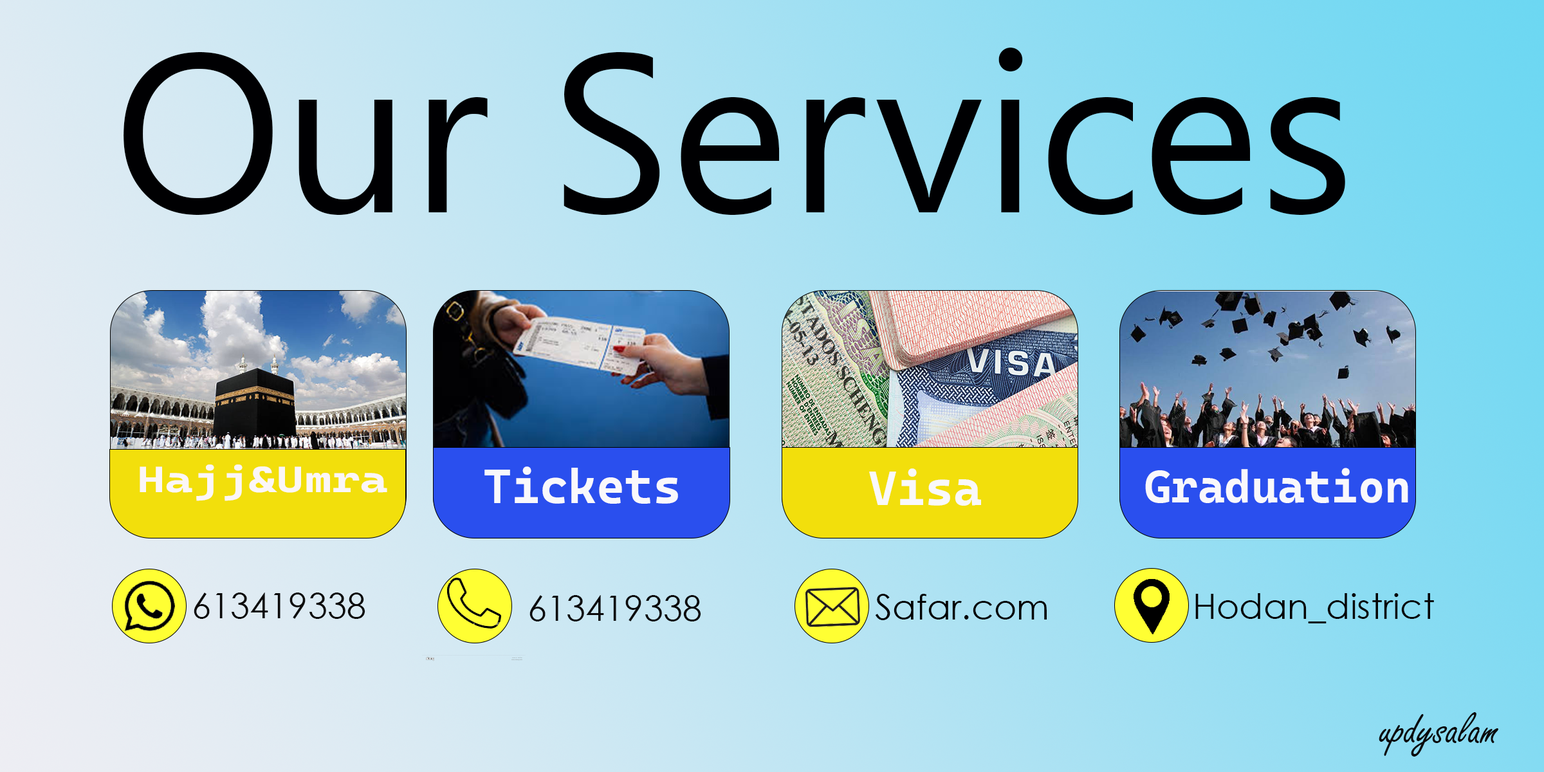
<style>
.page{position:relative;width:1544px;height:772px}
.page>*{position:absolute;margin:0}
.t1{font:225.2px "SegoeUISymbol";color:#000002}
.t2{font:36.7px "CascadiaCodeRoman-Bold";color:#fbf6f7;scale:1.3 1}
.t3{font:48.3px "CascadiaCodeRoman-Bold";color:#f9f8fb}
.t4{font:45.6px "CascadiaCodeRoman-Bold";color:#f9f8fb}
.t5{font:35px "CenturyGothic";color:#0b0a0a}
.t6{font:35px "CenturyGothic";color:#020203}
.t7{font:35px "CenturyGothic";color:#060506}
.t8{font:35px "CenturyGothic";color:#0b0a0b}
.t9{font:48.3px "FreestyleScript-Regular";color:#0b0a0b}
</style>
<div class="page">
<p class="t1" style="left:124px;top:48px;width:1221px;height:167px">Our Services</p>
<p class="t2" style="left:140px;top:465px;width:247px;height:36px">Hajj&amp;Umra</p>
<p class="t3" style="left:485px;top:467px;width:193px;height:37px">Tickets</p>
<p class="t3" style="left:869px;top:468px;width:112px;height:38px">Visa</p>
<p class="t4" style="left:1145px;top:468px;width:264px;height:35px">Graduation</p>
<p class="t5" style="left:194px;top:593px;width:171px;height:26px">613419338</p>
<p class="t6" style="left:875px;top:594px;width:172px;height:26px">Safar.com</p>
<p class="t7" style="left:1196px;top:593px;width:238px;height:31px">Hodan_district</p>
<p class="t8" style="left:530px;top:595px;width:171px;height:27px">613419338</p>
<p class="t9" style="left:1379px;top:712px;width:120px;height:45px">updysalam</p>
</div>
